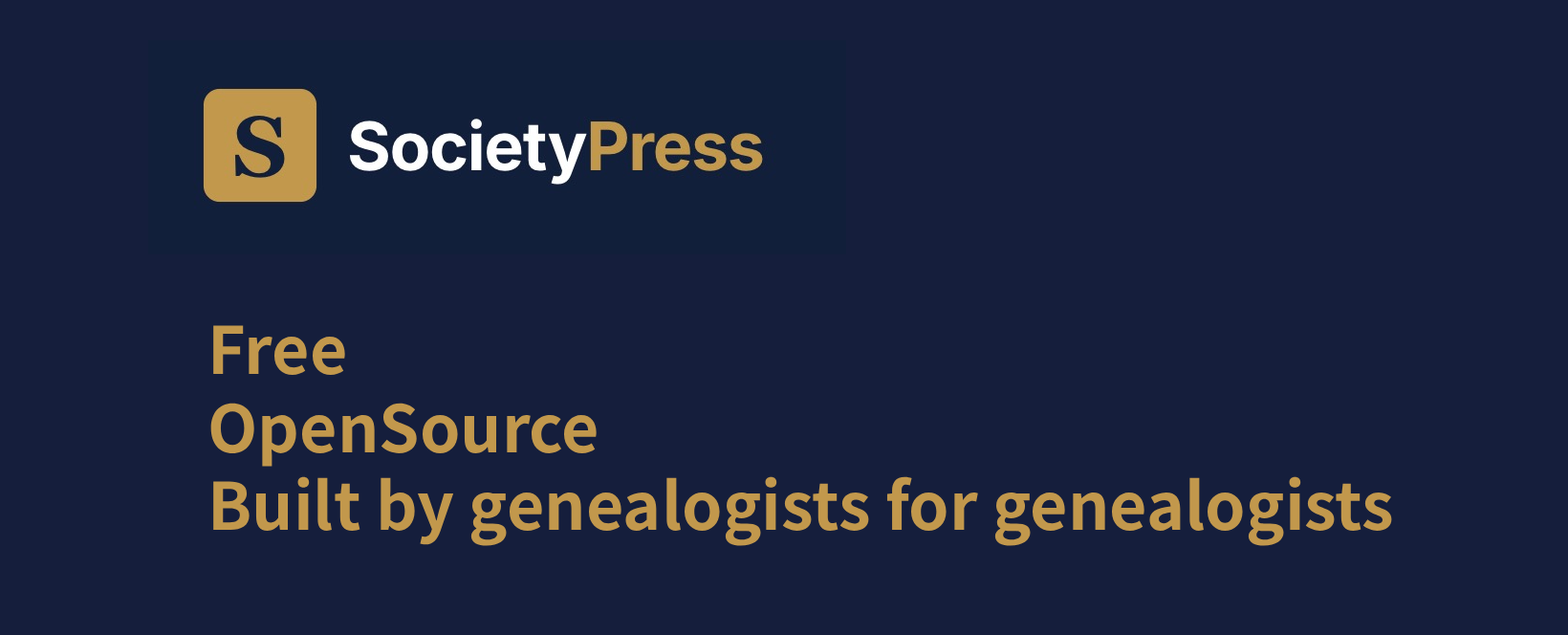
<style>
.page{position:relative;width:1568px;height:635px;background:#151e3c}
.page>*{position:absolute;margin:0}
.t1{font:65px "SourceHanSansHC-Bold";color:#c2984c}
</style>
<div class="page">
<p class="t1" style="left:210px;top:325px;width:1182px;height:221px">Free<br>OpenSource<br>Built by genealogists for genealogists</p>
</div>
